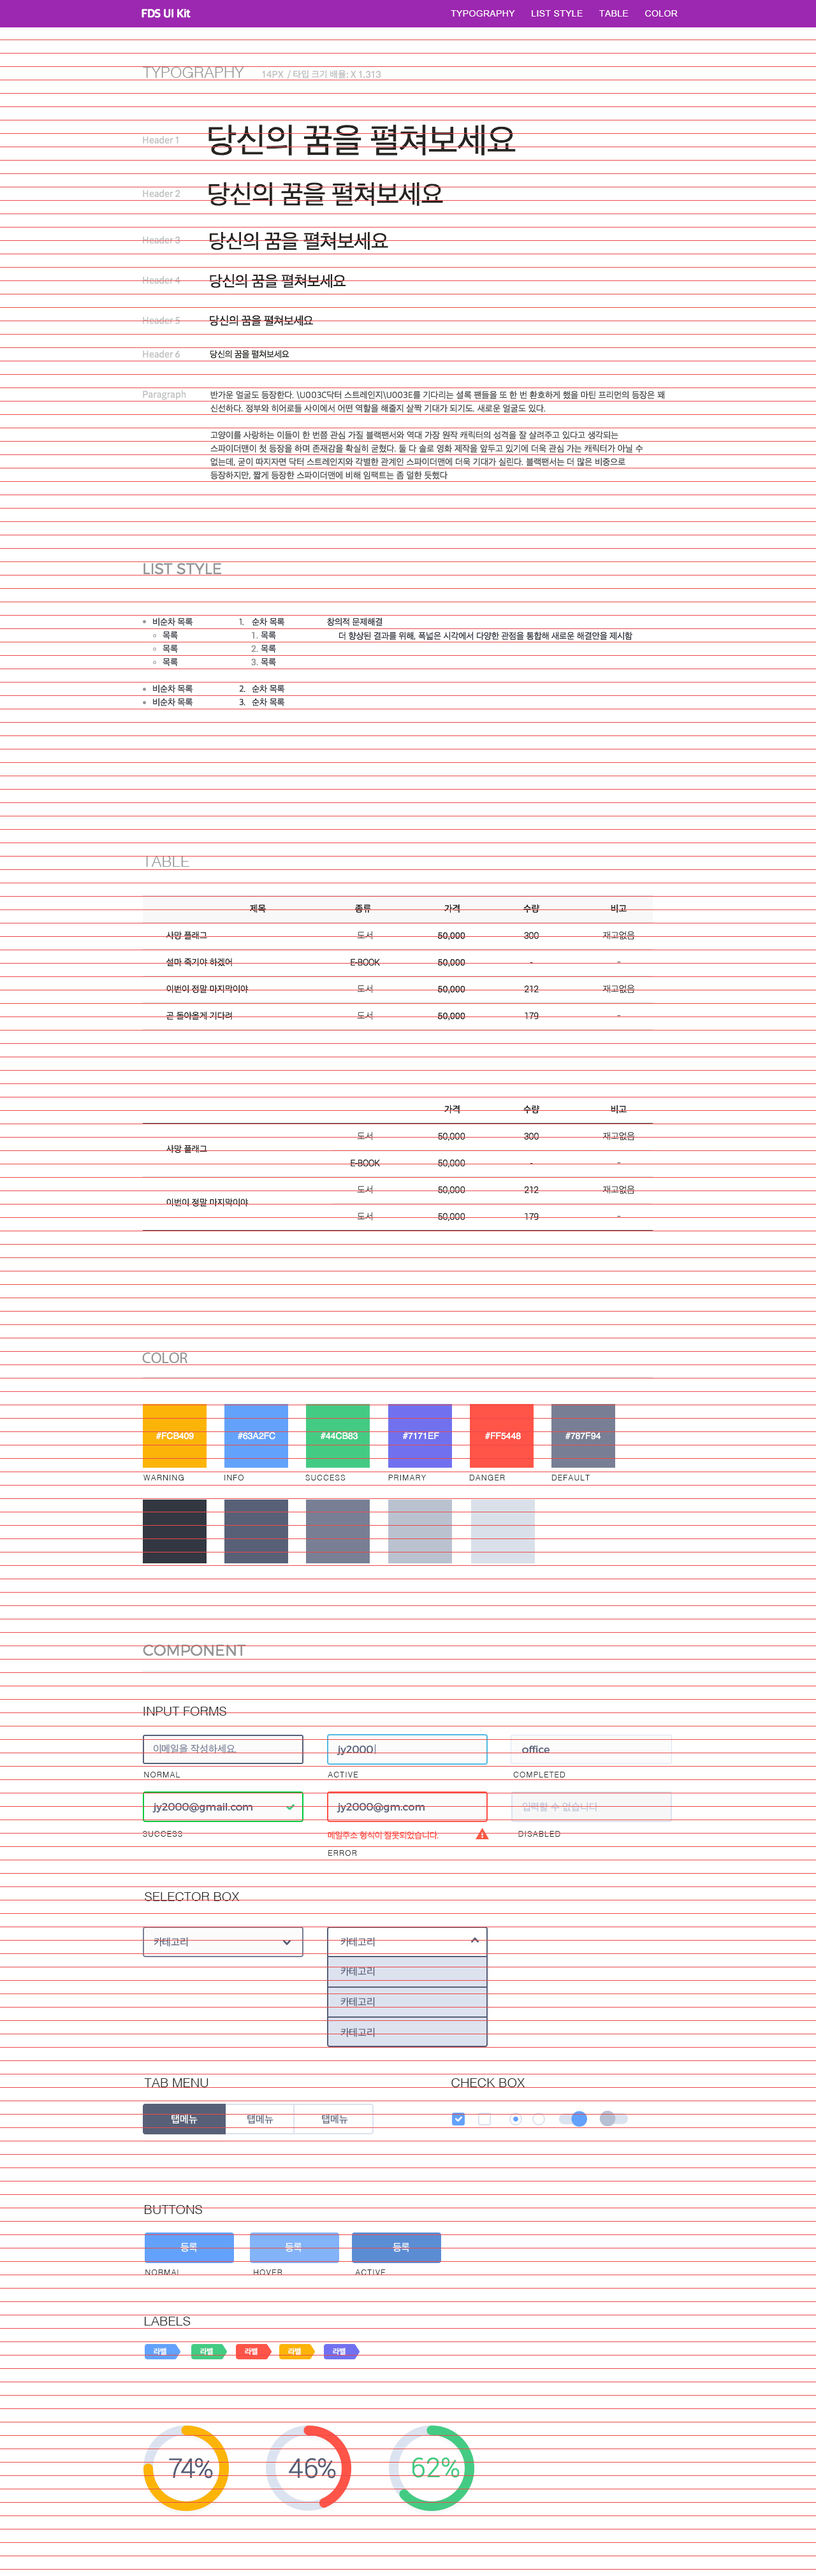
<style>
.page{position:relative;width:816px;height:2576px;background:#ffffff}
.page>*{position:absolute;margin:0}
.t1{font:11.5px "AppleSDGothicNeo-Bold";letter-spacing:-0.025em;color:#ffffff}
.t2{font:8.9px "ArialMT";letter-spacing:0.025em;color:#ffffff;text-transform:uppercase}
.t3{font:15.3px "Helvetica-Light";color:#969595;text-transform:uppercase}
.t4{font:8.9px "SpoqaHanSans-Regular";color:#c0c1c2;text-transform:uppercase}
.t5{font:34.8px "AppleSDGothicNeo-Regular";letter-spacing:-0.025em;color:#272522;text-transform:uppercase}
.t6{font:8.9px "SpoqaHanSans-Regular";color:#c0c1c2}
.t7{font:26.5px "AppleSDGothicNeo-Regular";letter-spacing:-0.025em;color:#272522;text-transform:uppercase}
.t8{font:20.2px "AppleSDGothicNeo-Regular";letter-spacing:-0.025em;color:#272522;text-transform:uppercase}
.t9{font:15.4px "AppleSDGothicNeo-Regular";letter-spacing:-0.025em;color:#272522;text-transform:uppercase}
.t10{font:11.7px "AppleSDGothicNeo-Regular";letter-spacing:-0.025em;color:#272522;text-transform:uppercase}
.t11{font:8.9px "AppleSDGothicNeo-Regular";letter-spacing:-0.025em;color:#272522;text-transform:uppercase}
.t12{font:8.9px "AppleSDGothicNeo-Regular";color:#505050;text-transform:uppercase}
.t13{font:15.3px "Montserrat-Light";color:#969595;text-transform:uppercase}
.t14{font:8.9px "AppleSDGothicNeo-Regular";letter-spacing:-0.01em;color:#333741;text-transform:uppercase}
.t15{font:8.9px "Roboto-Regular";letter-spacing:-0.025em;color:#969595;text-transform:uppercase}
.t16{font:8.9px "SpoqaHanSans-Regular";letter-spacing:-0.025em;color:#272522;text-transform:uppercase}
.t17{font:8.9px "AppleSDGothicNeo-Regular";color:#272522;text-transform:uppercase}
.t18{font:8.9px "Roboto-Light";letter-spacing:-0.025em;color:#272522;text-transform:uppercase}
.t19{font:8.9px "SpoqaHanSans-Thin";letter-spacing:-0.025em;color:#272522;text-transform:uppercase}
.t20{font:8.9px "Helvetica";color:#272522;text-transform:uppercase}
.t21{font:8.9px "Roboto-Light";color:#272522;text-transform:uppercase}
.t22{font:15.3px "MyriadPro-Regular";color:#969595;text-transform:uppercase}
.t23{font:8.9px "Helvetica";color:#ffffff;text-transform:uppercase}
.t24{font:7.6px "Helvetica-Light";letter-spacing:0.1em;color:#2c2c2c;text-transform:uppercase}
.t25{font:12.7px "Helvetica-Light";color:#2c2c2c}
.t26{font:10.2px "AppleSDGothicNeo-Regular";color:#787f94}
.t27{font:10.2px "Montserrat-Regular";color:#586077}
.t28{font:10.2px "AppleSDGothicNeo-Regular";color:#bfc6d9}
.t29{font:8.9px "AppleSDGothicNeo-Regular";letter-spacing:-0.025em;color:#ff5448}
.t30{font:10.2px "AppleSDGothicNeo-Regular";color:#586077}
.t31{font:10.2px/15.3px "AppleSDGothicNeo-Regular";color:#586077}
.t32{font:10.2px "AppleSDGothicNeo-Regular";color:#ffffff}
.t33{font:10.2px "AppleSDGothicNeo-Regular";color:#576077}
.t34{font:10.2px "AppleSDGothicNeo-Regular";letter-spacing:-0.025em;color:#ffffff;text-transform:uppercase}
.t35{font:7.6px "AppleSDGothicNeo-SemiBold";color:#ffffff;text-transform:uppercase}
.t36{font:26.8px "Roboto-Light";color:#586077}
.t37{font:26.8px "Roboto-Light";color:#44cb83}
</style>
<div class="page">
<p class="t1" style="left:141px;top:9px;width:50px;height:9px">FDS UI Kit</p>
<p class="t2" style="left:451px;top:10px;width:226px;height:7px">Typography      LIST STYLE      table      color</p>
<p class="t3" style="left:143px;top:67px;width:101px;height:11px">Typography</p>
<p class="t4" style="left:262px;top:69px;width:119px;height:10px">14PX  / 타입 크기 배율: x 1.313</p>
<p class="t5" style="left:208px;top:124px;width:308px;height:32px">당신의 꿈을 펼쳐보세요</p>
<p class="t6" style="left:143px;top:136px;width:43px;height:264px">Header 1<br><br><br>Header 2<br><br><br>Header 3<br><br>Header 4<br><br>Header 5<br><br>Header 6<br><br>Paragraph</p>
<p class="t7" style="left:208px;top:182px;width:235px;height:24px">당신의 꿈을 펼쳐보세요</p>
<p class="t8" style="left:209px;top:231px;width:179px;height:19px">당신의 꿈을 펼쳐보세요</p>
<p class="t9" style="left:210px;top:274px;width:136px;height:14px">당신의 꿈을 펼쳐보세요</p>
<p class="t10" style="left:210px;top:315px;width:103px;height:11px">당신의 꿈을 펼쳐보세요</p>
<p class="t11" style="left:210px;top:350px;width:79px;height:8px">당신의 꿈을 펼쳐보세요</p>
<p class="t12" style="left:210px;top:391px;width:455px;height:89px">반가운 얼굴도 등장한다. \u003c닥터 스트레인지\u003e를 기다리는 셜록 팬들을 또 한 번 환호하게 했을 마틴 프리먼의 등장은 꽤 신선하다. 정부와 히어로들 사이에서 어떤 역할을 해줄지 살짝 기대가 되기도. 새로운 얼굴도 있다. <br>고양이를 사랑하는 이들이 한 번쯤 관심 가질 블랙팬서와 역대 가장 원작 캐릭터의 성격을 잘 살려주고 있다고 생각되는 스파이더맨이 첫 등장을 하며 존재감을 확실히 굳혔다. 둘 다 솔로 영화 제작을 앞두고 있기에 더욱 관심 가는 캐릭터가 아닐 수 없는데, 굳이 따지자면 닥터 스트레인지와 각별한 관계인 스파이더맨에 더욱 기대가 실린다. 블랙팬서는 더 많은 비중으로 등장하지만, 짧게 등장한 스파이더맨에 비해 임팩트는 좀 덜한 듯했다</p>
<p class="t13" style="left:143px;top:563px;width:79px;height:12px">list style</p>
<p class="t14" style="left:153px;top:618px;width:40px;height:88px">비순차 목록<br><br><br>비순차 목록 <br>비순차 목록</p>
<p class="t14" style="left:252px;top:618px;width:33px;height:89px">순차 목록<br><br><br>순차 목록 <br>순차 목록</p>
<p class="t14" style="left:327px;top:618px;width:55px;height:8px">창의적 문제해결</p>
<p class="t14" style="left:239px;top:618px;width:6px;height:88px">1.<br><br><br>2.<br>3.</p>
<p class="t14" style="left:163px;top:631px;width:15px;height:36px">목록<br>목록<br>목록</p>
<p class="t15" style="left:251px;top:632px;width:7px;height:34px">1.<br>2.<br>3.</p>
<p class="t14" style="left:261px;top:631px;width:15px;height:36px">목록<br>목록<br>목록</p>
<p class="t14" style="left:338px;top:632px;width:294px;height:8px">더 향상된 결과를 위해, 폭넓은 시각에서 다양한 관점을 통합해 새로운 해결안을 제시함</p>
<p class="t3" style="left:143px;top:856px;width:46px;height:11px">table</p>
<p class="t16" style="left:250px;top:904px;width:16px;height:9px">제목</p>
<p class="t16" style="left:355px;top:904px;width:16px;height:9px">종류</p>
<p class="t16" style="left:444px;top:904px;width:15px;height:9px">가격</p>
<p class="t16" style="left:523px;top:904px;width:16px;height:9px">수량</p>
<p class="t16" style="left:611px;top:904px;width:15px;height:9px">비고</p>
<p class="t17" style="left:166px;top:931px;width:83px;height:89px">사망 플래그<br>설마 죽기야 하겠어<br>이번이 정말 마지막이야<br>곧 돌아올게 기다려</p>
<p class="t18" style="left:351px;top:931px;width:29px;height:89px;text-align:center"><span class="t19">도서<br></span>e-book<br><span class="t19">도서<br>도서</span></p>
<p class="t20" style="left:437px;top:932px;width:28px;height:88px">50,000<br>50,000<br>50,000<br>50,000</p>
<p class="t18" style="left:524px;top:932px;width:15px;height:88px;text-align:center">300<br>-<br>212<br>179</p>
<p class="t19" style="left:603px;top:931px;width:32px;height:86px;text-align:center">재고없음<br>-<br>재고없음<br>-</p>
<p class="t16" style="left:444px;top:1105px;width:15px;height:8px">가격</p>
<p class="t16" style="left:523px;top:1105px;width:16px;height:8px">수량</p>
<p class="t16" style="left:611px;top:1105px;width:15px;height:8px">비고</p>
<p class="t18" style="left:351px;top:1132px;width:29px;height:88px;text-align:center"><span class="t19">도서<br></span>e-book<br><span class="t19">도서<br>도서</span></p>
<p class="t21" style="left:438px;top:1132px;width:27px;height:89px">50,000<br>50,000<br>50,000<br>50,000</p>
<p class="t18" style="left:524px;top:1132px;width:15px;height:88px;text-align:center">300<br>-<br>212<br>179</p>
<p class="t19" style="left:603px;top:1132px;width:32px;height:85px;text-align:center">재고없음<br>-<br>재고없음<br>-</p>
<p class="t17" style="left:166px;top:1145px;width:83px;height:61px">사망 플래그<br><br>이번이 정말 마지막이야</p>
<p class="t22" style="left:142px;top:1352px;width:45px;height:11px">color</p>
<p class="t23" style="left:156px;top:1432px;width:38px;height:8px">#fcb409</p>
<p class="t23" style="left:237px;top:1432px;width:38px;height:8px">#63a2fc</p>
<p class="t23" style="left:320px;top:1432px;width:38px;height:8px">#44cb83</p>
<p class="t23" style="left:402px;top:1432px;width:37px;height:7px">#7171ef</p>
<p class="t23" style="left:484px;top:1432px;width:37px;height:8px">#ff5448</p>
<p class="t23" style="left:565px;top:1432px;width:36px;height:8px">#787f94</p>
<p class="t24" style="left:143px;top:1475px;width:41px;height:5px">warning</p>
<p class="t24" style="left:224px;top:1475px;width:19px;height:5px">info</p>
<p class="t24" style="left:305px;top:1475px;width:40px;height:5px">success</p>
<p class="t24" style="left:388px;top:1475px;width:38px;height:5px">primary</p>
<p class="t24" style="left:469px;top:1475px;width:36px;height:5px">danger</p>
<p class="t24" style="left:551px;top:1475px;width:39px;height:5px">default</p>
<p class="t13" style="left:143px;top:1644px;width:103px;height:12px">COMPONENT</p>
<p class="t25" style="left:143px;top:1707px;width:83px;height:9px">INPUT FORMS</p>
<p class="t26" style="left:154px;top:1744px;width:82px;height:10px">이메일을 작성하세요.</p>
<p class="t27" style="left:336px;top:1746px;width:37px;height:9px">jy2000</p>
<p class="t27" style="left:522px;top:1746px;width:27px;height:7px">office</p>
<p class="t24" style="left:144px;top:1772px;width:36px;height:5px">normal</p>
<p class="t24" style="left:328px;top:1772px;width:30px;height:5px">Active</p>
<p class="t24" style="left:513px;top:1772px;width:52px;height:5px">Completed</p>
<p class="t27" style="left:152px;top:1803px;width:100px;height:10px">jy2000@gmail.com</p>
<p class="t27" style="left:336px;top:1803px;width:88px;height:10px">jy2000@gm.com</p>
<p class="t28" style="left:522px;top:1802px;width:76px;height:10px">입력할 수 없습니다</p>
<p class="t24" style="left:143px;top:1831px;width:39px;height:6px">Success</p>
<p class="t29" style="left:328px;top:1831px;width:110px;height:9px">메일주소 형식이 잘못되었습니다.</p>
<p class="t24" style="left:518px;top:1831px;width:42px;height:6px">Disabled</p>
<p class="t24" style="left:328px;top:1850px;width:29px;height:6px">Error</p>
<p class="t25" style="left:145px;top:1892px;width:95px;height:9px">SELECTOR BOX</p>
<p class="t30" style="left:154px;top:1937px;width:34px;height:10px">카테고리</p>
<p class="t30" style="left:340px;top:1937px;width:35px;height:10px">카테고리</p>
<p class="t31" style="left:340px;top:1967px;width:35px;height:70px">카테고리 <br><br>카테고리<br><br>카테고리</p>
<p class="t25" style="left:144px;top:2078px;width:64px;height:9px">TAB MENU</p>
<p class="t25" style="left:451px;top:2078px;width:74px;height:9px">CHECK BOX</p>
<p class="t32" style="left:171px;top:2115px;width:27px;height:9px">탭메뉴</p>
<p class="t33" style="left:247px;top:2115px;width:26px;height:9px">탭메뉴</p>
<p class="t33" style="left:322px;top:2115px;width:26px;height:9px">탭메뉴</p>
<p class="t25" style="left:145px;top:2205px;width:57px;height:9px">BUTTONS</p>
<p class="t34" style="left:180px;top:2243px;width:18px;height:9px">등록</p>
<p class="t34" style="left:285px;top:2243px;width:17px;height:9px">등록</p>
<p class="t34" style="left:393px;top:2243px;width:17px;height:9px">등록</p>
<p class="t24" style="left:145px;top:2269px;width:36px;height:6px">normal</p>
<p class="t24" style="left:254px;top:2269px;width:28px;height:6px">hover</p>
<p class="t24" style="left:355px;top:2269px;width:31px;height:6px">Active</p>
<p class="t25" style="left:145px;top:2317px;width:46px;height:9px">LABELS</p>
<p class="t35" style="left:154px;top:2348px;width:12px;height:7px">라벨</p>
<p class="t35" style="left:200px;top:2348px;width:13px;height:7px">라벨</p>
<p class="t35" style="left:245px;top:2348px;width:12px;height:7px">라벨</p>
<p class="t35" style="left:288px;top:2348px;width:13px;height:7px">라벨</p>
<p class="t35" style="left:333px;top:2348px;width:12px;height:7px">라벨</p>
<p class="t36" style="left:169px;top:2458px;width:44px;height:20px">74%</p>
<p class="t36" style="left:289px;top:2458px;width:47px;height:20px">46%</p>
<p class="t37" style="left:412px;top:2457px;width:47px;height:21px">62%</p>
</div>
